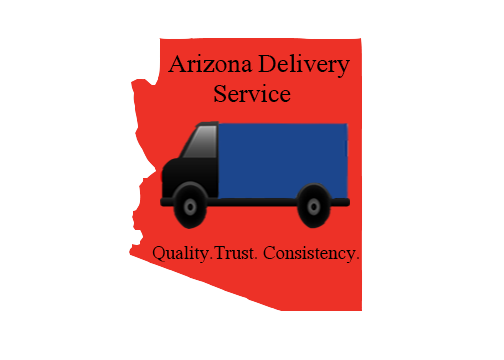
<style>
.page{position:relative;width:504px;height:360px;background:#ffffff}
.page>*{position:absolute;margin:0}
.t1{font:26px "David";color:#000000}
.t2{font:19px "David";color:#000000}
</style>
<div class="page">
<p class="t1" style="left:168px;top:54px;width:182px;height:24px">Arizona Delivery</p>
<p class="t1" style="left:214px;top:84px;width:77px;height:18px">Service</p>
<p class="t2" style="left:152px;top:246px;width:207px;height:17px">Quality.Trust. Consistency.</p>
</div>
